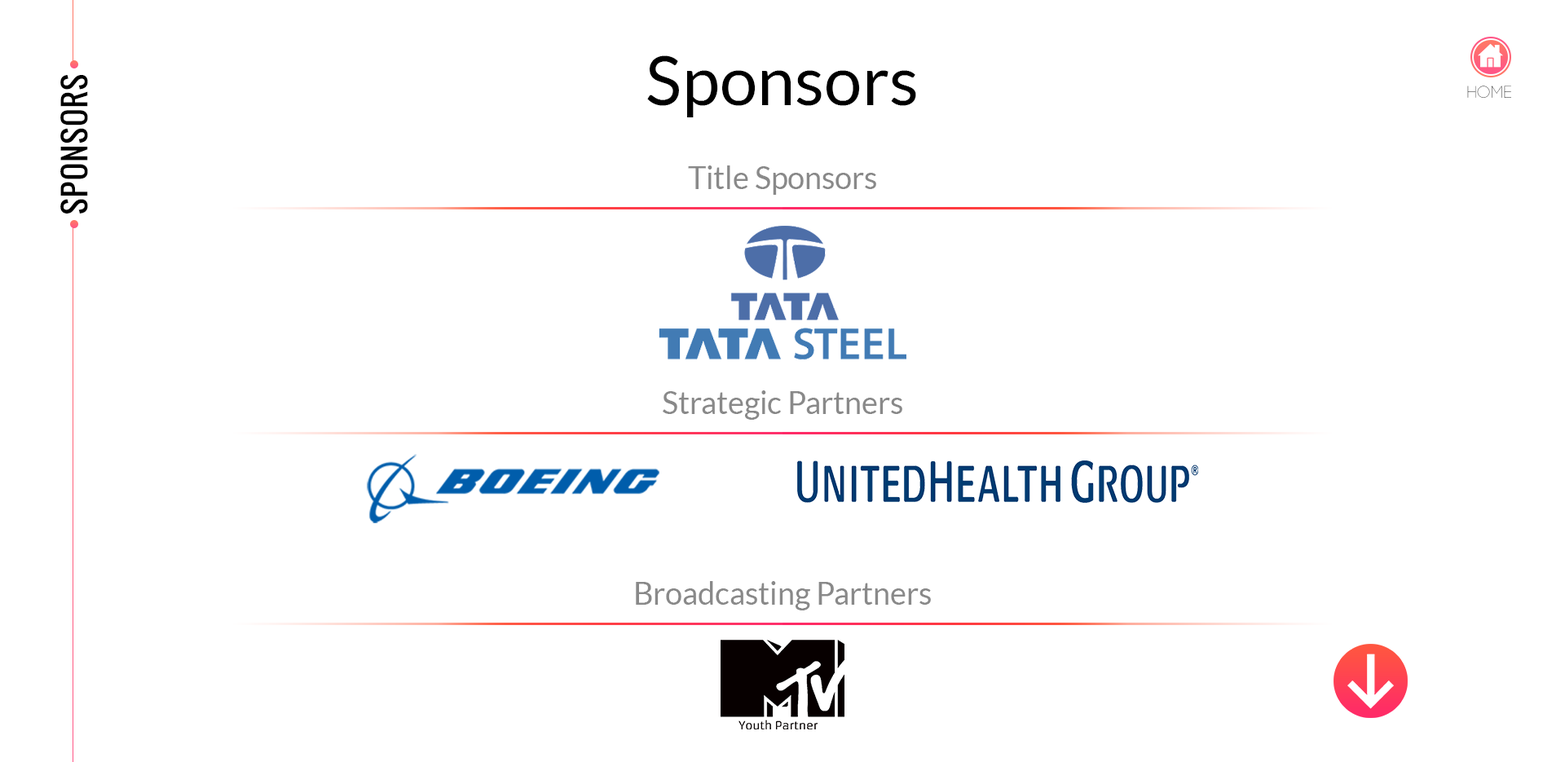
<style>
.page{position:relative;width:1565px;height:762px;background:#ffffff}
.page>*{position:absolute;margin:0}
.t1{font:67.9px "Lato-Regular";color:#000000}
.t2{font:30.6px "Oswald";letter-spacing:0.05em;color:#000000}
.t3{font:17px "Code-Light";letter-spacing:0.05em}
.t4{font:30.6px "Lato-Regular";color:#898989}
</style>
<div class="page">
<p class="t1" style="left:647px;top:55px;width:269px;height:62px">Sponsors</p>
<p class="t2" style="left:60px;top:75px;width:28px;height:139px;rotate:-90deg">SPONSORS</p>
<p class="t3" style="left:1467px;top:86px;width:44px;height:12px">HOME</p>
<p class="t4" style="left:688px;top:165px;width:188px;height:30px">Title Sponsors</p>
<p class="t4" style="left:663px;top:390px;width:239px;height:30px">Strategic Partners</p>
<p class="t4" style="left:636px;top:581px;width:295px;height:29px">Broadcasting Partners</p>
</div>
